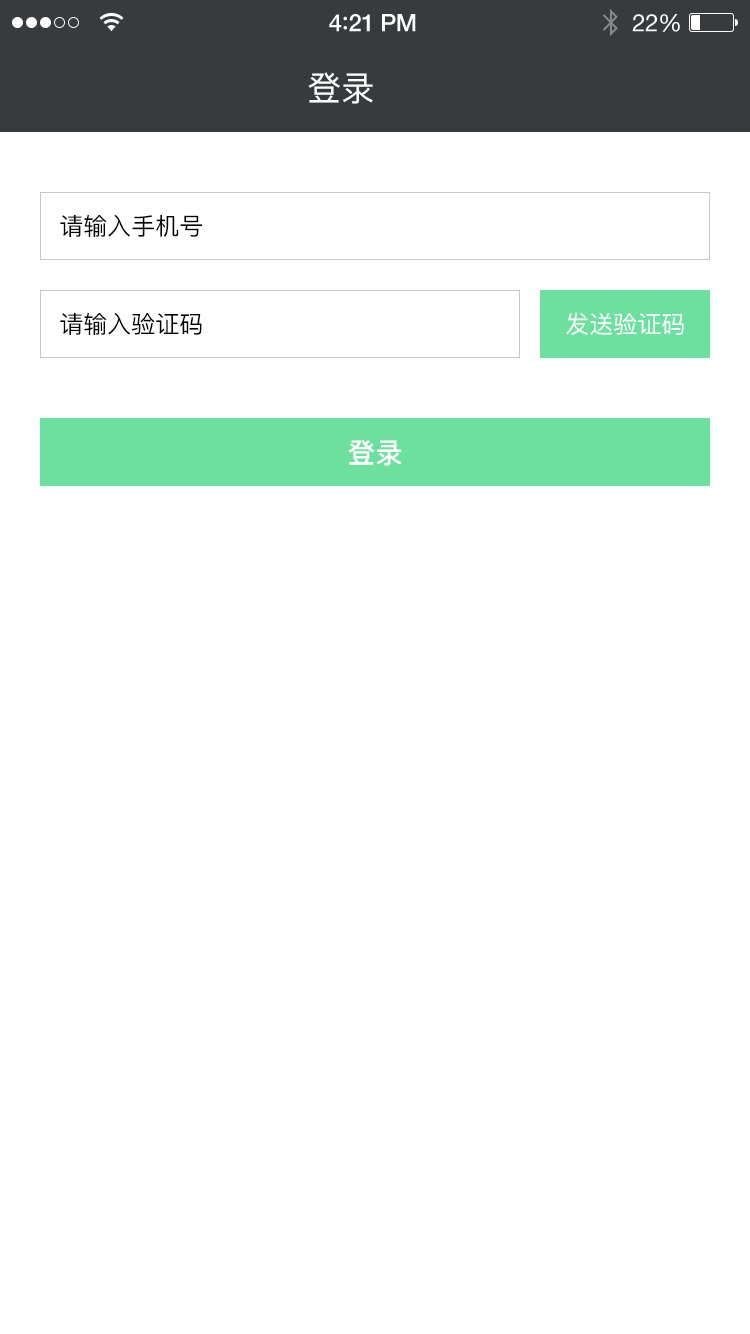
<style>
.page{position:relative;width:750px;height:1334px;background:#ffffff}
.page>*{position:absolute;margin:0}
.t1{font:34px "PingFangSC-Regular";color:#ffffff}
.t2{font:24px "PingFangSC-Regular";color:#000000}
.t3{font:24px "PingFangSC-Regular";color:#ffffff}
.t4{font:28px "PingFangSC-Medium";color:#ffffff}
</style>
<div class="page">
<p class="t1" style="left:308px;top:72px;width:65px;height:32px">登录</p>
<p class="t2" style="left:60px;top:214px;width:142px;height:23px">请输入手机号</p>
<p class="t2" style="left:60px;top:312px;width:142px;height:23px">请输入验证码</p>
<p class="t3" style="left:566px;top:312px;width:118px;height:23px">发送验证码</p>
<p class="t4" style="left:348px;top:439px;width:54px;height:27px">登录</p>
</div>
